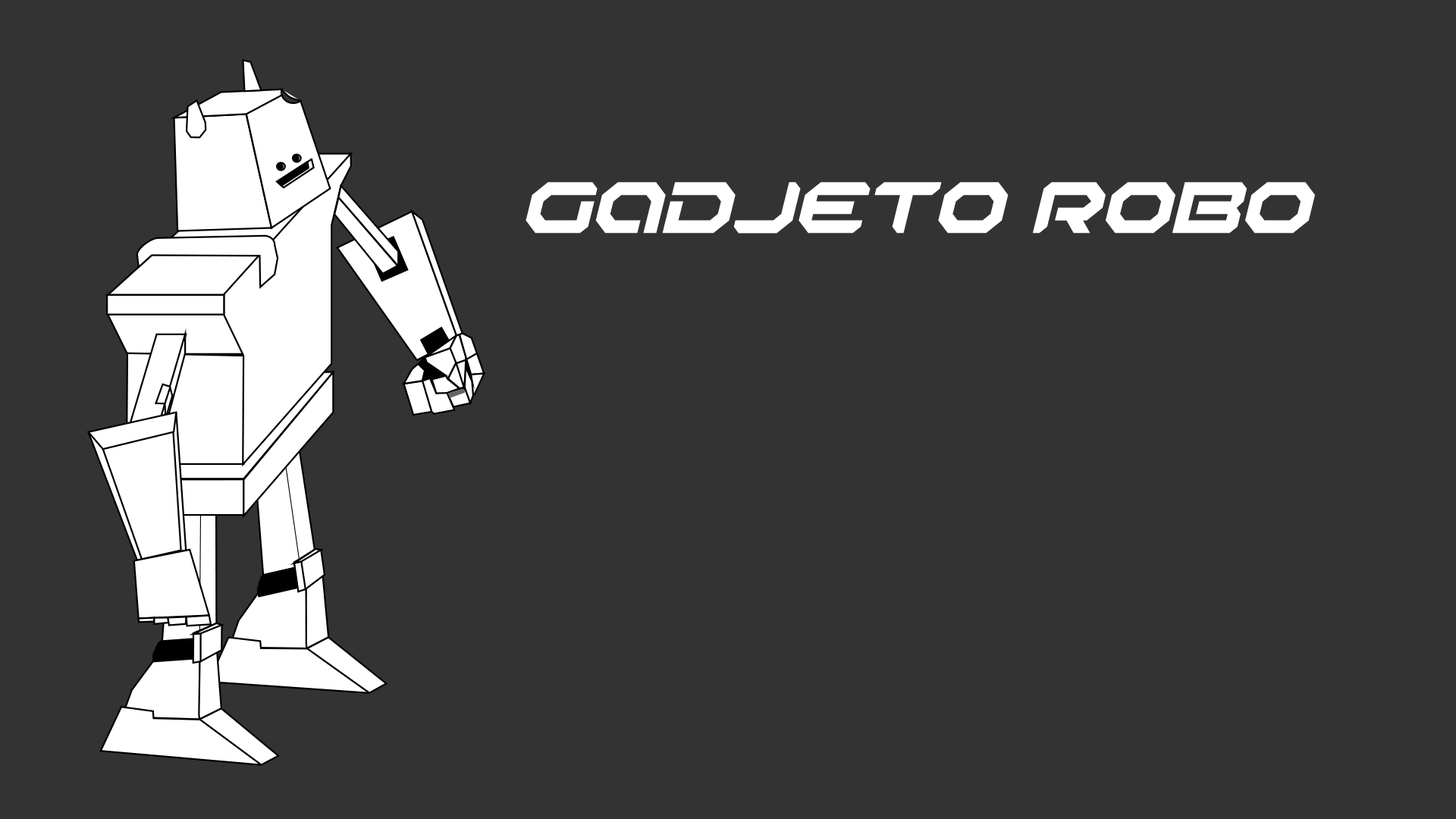
<style>
.page{position:relative;width:1456px;height:819px;background:#333333}
.page>*{position:absolute;margin:0}
.t1{font:75.8px "RobotaurItalic";color:#ffffff}
</style>
<div class="page">
<p class="t1" style="left:526px;top:182px;width:789px;height:52px">Gadjeto RObo</p>
</div>
